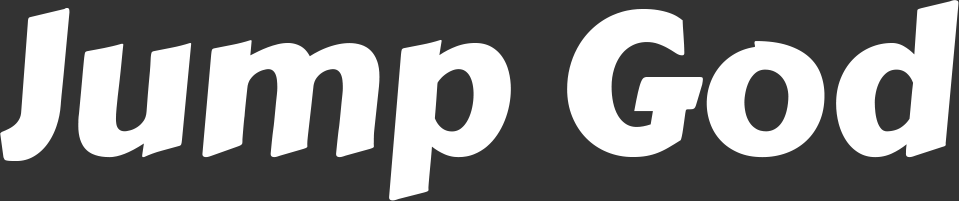
<style>
.page{position:relative;width:959px;height:201px;background:#333333}
.page>*{position:absolute;margin:0}
.t1{font:200px "CarterOne";color:#ffffff}
</style>
<div class="page">
<p class="t1" style="left:0px;top:0px;width:959px;height:201px">Jump God</p>
</div>
